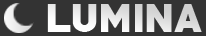
<style>
.page{position:relative;width:206px;height:36px;background:#333333}
.page>*{position:absolute;margin:0}
.t1{font:36px "PRIMETIME-Regular";letter-spacing:0.01em;color:#e6e6e6}
</style>
<div class="page">
<p class="t1" style="left:47px;top:4px;width:155px;height:28px">LUMINA</p>
</div>
